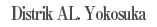
<style>
.page{position:relative;width:157px;height:27px;background:#ffffff}
.page>*{position:absolute;margin:0}
.t1{font:18px "RyuminPro-ExBold";letter-spacing:-0.08em;color:#4c4843;scale:0.85 1}
</style>
<div class="page">
<p class="t1" style="left:11px;top:6px;width:136px;height:15px">Distrik AL. Yokosuka</p>
</div>
